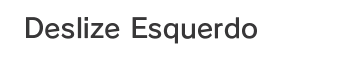
<style>
.page{position:relative;width:342px;height:60px;background:#ffffff}
.page>*{position:absolute;margin:0}
.t1{font:26.7px "RodinPro-DB";letter-spacing:0.008em;color:#383738}
</style>
<div class="page">
<p class="t1" style="left:26px;top:17px;width:231px;height:27px">Deslize Esquerdo</p>
</div>
